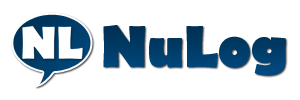
<style>
.page{position:relative;width:300px;height:100px;background:#ffffff}
.page>*{position:absolute;margin:0}
.t1{font:60px "BerlinSansFB-Bold";color:#003053}
</style>
<div class="page">
<p class="t1" style="left:103px;top:25px;width:183px;height:51px">NuLog</p>
</div>
